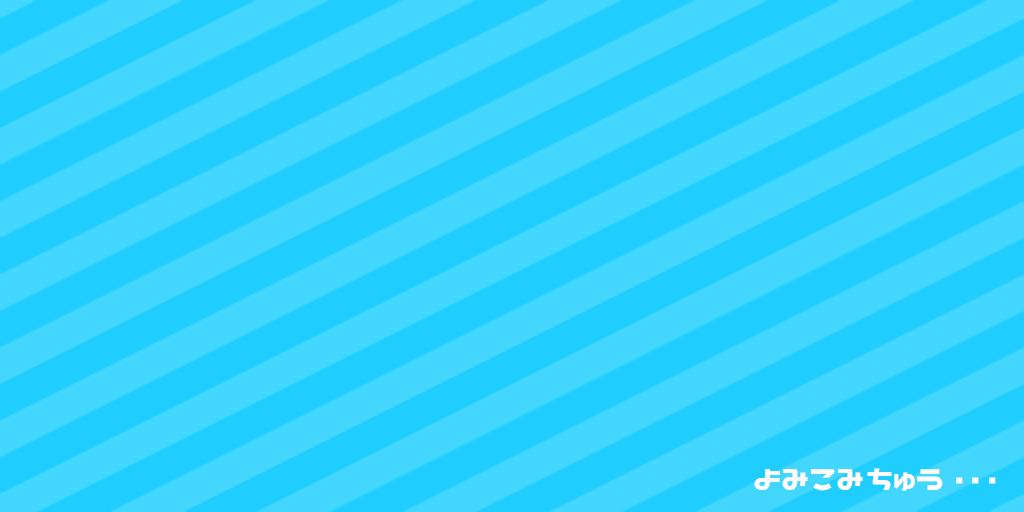
<style>
.page{position:relative;width:1024px;height:512px;background:#43d7ff}
.page>*{position:absolute;margin:0}
.t1{font:36px "Nicoca";color:#ffffff}
.t2{font:34.4px "Nicoca";letter-spacing:-0.1em;color:#ffffff}
</style>
<div class="page">
<p class="t1" style="left:754px;top:468px;width:189px;height:23px">よみこみちゅう</p>
<p class="t2" style="left:956px;top:477px;width:7px;height:7px">・</p>
<p class="t2" style="left:972px;top:477px;width:7px;height:7px">・</p>
<p class="t2" style="left:989px;top:477px;width:7px;height:7px">・</p>
</div>
